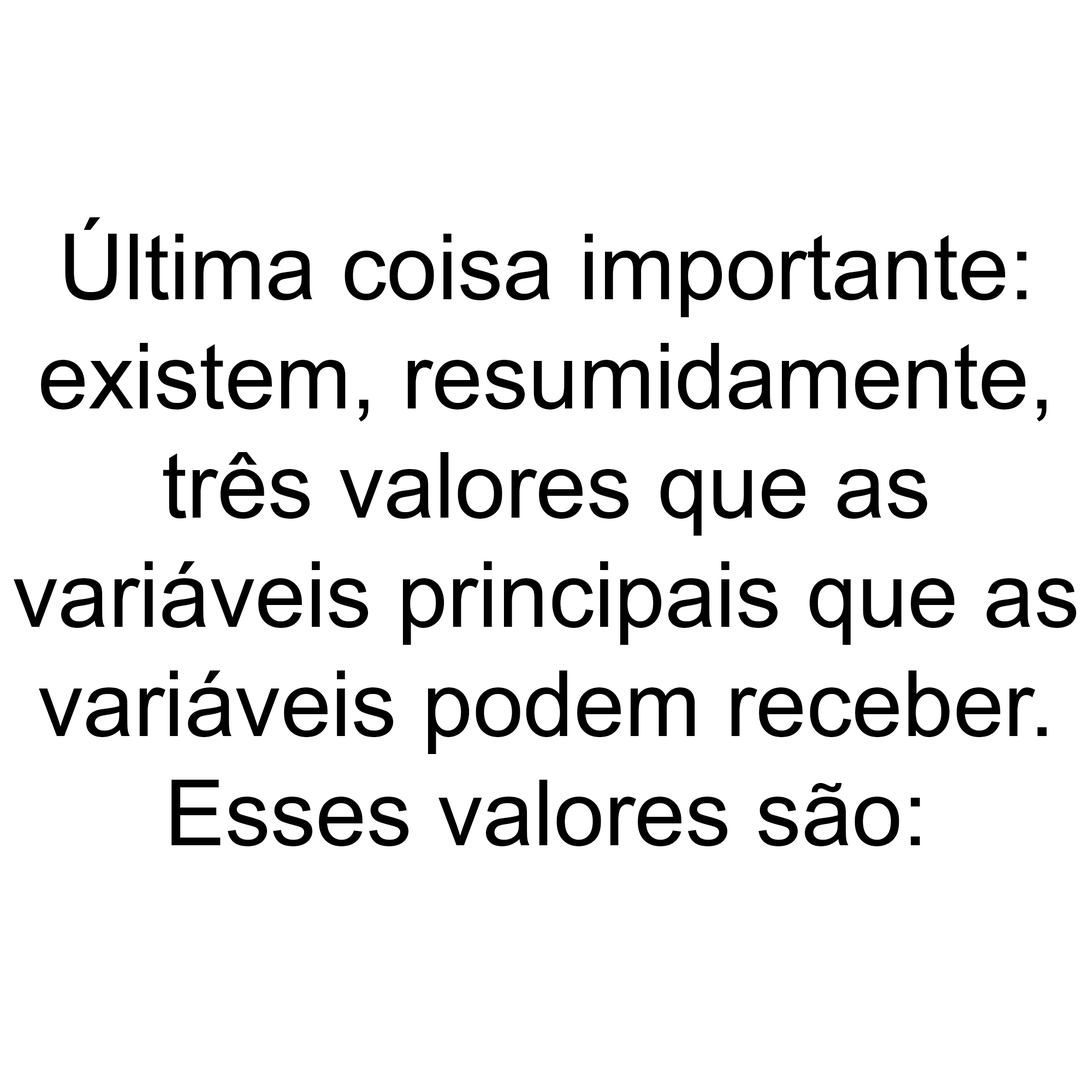
<style>
.page{position:relative;width:1092px;height:1092px;background:#ffffff}
.page>*{position:absolute;margin:0}
.t1{font:91px "ArialMT";color:#000000}
</style>
<div class="page">
<p class="t1" style="left:14px;top:217px;width:1063px;height:629px;text-align:center">Última coisa importante:<br>existem, resumidamente,<br>três valores que as<br>variáveis principais que as<br>variáveis podem receber.<br>Esses valores são:</p>
</div>
